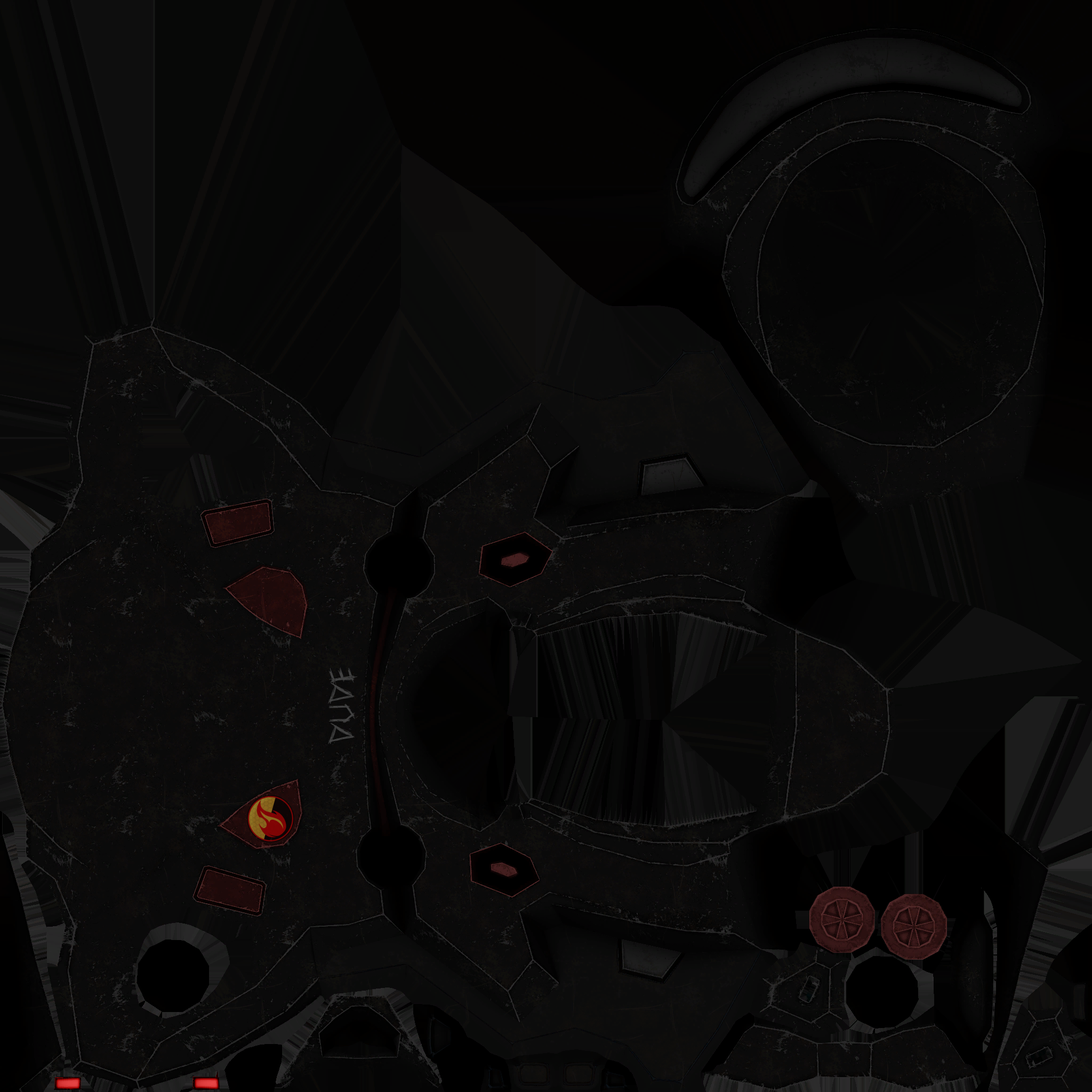
<style>
.page{position:relative;width:1092px;height:1092px}
.page>*{position:absolute;margin:0}
.t1{font:27.4px "HelpMe";color:#424242}
</style>
<div class="page">
<p class="t1" style="left:328px;top:667px;width:30px;height:77px;rotate:-90deg">Dude</p>
</div>
